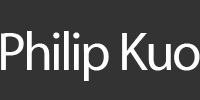
<style>
.page{position:relative;width:200px;height:100px;background:#333333}
.page>*{position:absolute;margin:0}
.t1{font:54.8px "MyriadSetPro-Medium";letter-spacing:-0.05em;color:#ffffff}
</style>
<div class="page">
<p class="t1" style="left:1px;top:31px;width:199px;height:50px">Philip Kuo</p>
</div>
